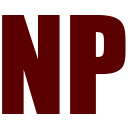
<style>
.page{position:relative;width:128px;height:128px;background:#5a0000}
.page>*{position:absolute;margin:0}
.t1{font:125px "Impact";color:#5a0000}
</style>
<div class="page">
<p class="t1" style="left:2px;top:15px;width:124px;height:99px">NP</p>
</div>
